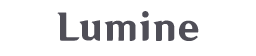
<style>
.page{position:relative;width:256px;height:56px;background:#ffffff}
.page>*{position:absolute;margin:0}
.t1{font:36px "HYWenHei-HEW";color:#4f4e57}
</style>
<div class="page">
<p class="t1" style="left:57px;top:11px;width:142px;height:30px">Lumine</p>
</div>
